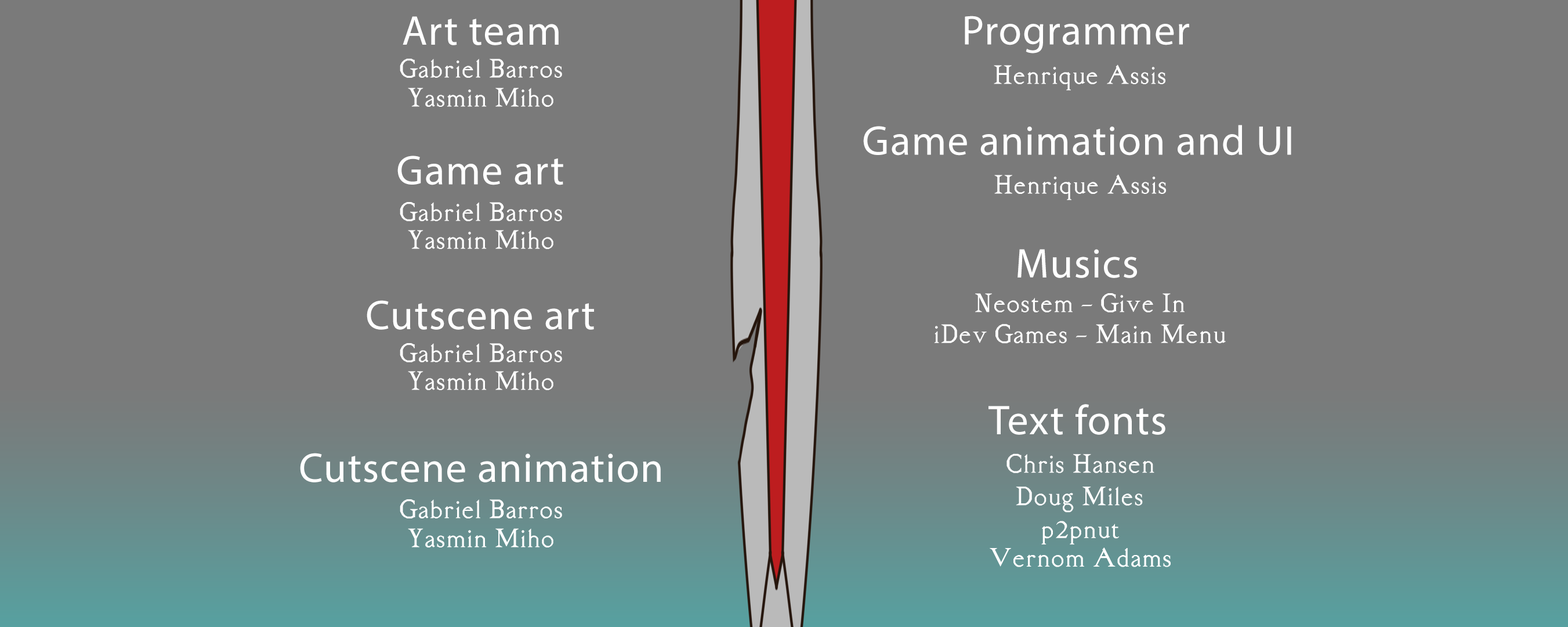
<style>
.page{position:relative;width:1568px;height:627px;background:#7a7a7a}
.page>*{position:absolute;margin:0}
.t1{font:41.8px "MyriadPro-Regular";letter-spacing:0.025em;color:#ffffff}
.t2{font:58px "RM-Almanack";letter-spacing:0.025em;color:#ffffff}
</style>
<div class="page">
<p class="t1" style="left:403px;top:16px;width:156px;height:29px">Art team</p>
<p class="t1" style="left:965px;top:16px;width:224px;height:37px">Programmer</p>
<p class="t2" style="left:994px;top:64px;width:171px;height:26px">Henrique Assis</p>
<p class="t2" style="left:408px;top:88px;width:145px;height:19px">Yasmin Miho</p>
<p class="t1" style="left:863px;top:125px;width:428px;height:30px">Game animation and UI</p>
<p class="t1" style="left:397px;top:155px;width:166px;height:30px">Game art</p>
<p class="t1" style="left:1017px;top:249px;width:120px;height:29px">Musics</p>
<p class="t2" style="left:975px;top:293px;width:210px;height:19px">Neostem - Give In</p>
<p class="t1" style="left:367px;top:300px;width:227px;height:29px">Cutscene art</p>
<p class="t2" style="left:934px;top:324px;width:292px;height:19px">iDev Games - Main Menu</p>
<p class="t1" style="left:988px;top:404px;width:177px;height:30px">Text fonts</p>
<p class="t1" style="left:300px;top:452px;width:361px;height:30px">Cutscene animation</p>
<p class="t2" style="left:1006px;top:453px;width:148px;height:20px">Chris Hansen</p>
<p class="t2" style="left:1016px;top:486px;width:127px;height:26px">Doug Miles</p>
<p class="t2" style="left:1041px;top:520px;width:78px;height:24px">p2pnut</p>
<p class="t2" style="left:990px;top:547px;width:181px;height:20px">Vernom Adams</p>
</div>
